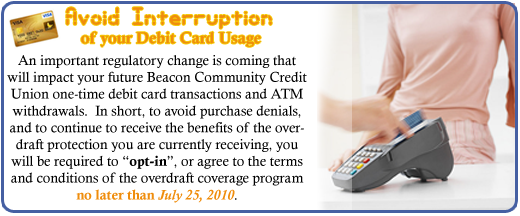
<style>
.page{position:relative;width:520px;height:216px;background:#ffffff}
.page>*{position:absolute;margin:0}
.t1{font:16px "CalisMTBol";color:#ef8d0d}
.t2{font:24px "EntangledLayerABRK";color:#ef8d0d}
.t3{font:14px "CalistoMT";color:#000000}
.t4{font:14px "CalisMTBol";color:#000000}
.t5{font:14px "CalisMTBol";color:#ef8d0d}
.t6{font:14px "CalistoMT-BoldItalic";color:#ef8d0d}
</style>
<div class="page">
<p class="t1" style="left:66px;top:7px;width:206px;height:40px;text-align:center"><span class="t2">Avoid Interruption</span> <br>of your Debit Card Usage</p>
<p class="t3" style="left:7px;top:55px;width:300px;height:148px;text-align:center">An important regulatory change is coming that will impact your future Beacon Community Credit Union one-time debit card transactions and ATM withdrawals.  In short, to avoid purchase denials, and to continue to receive the benefits of the overdraft protection you are currently receiving, you will be required to “<span class="t4">opt-in</span>”, or agree to the terms and conditions of the overdraft coverage program <span class="t5">no later than </span><span class="t6">July 25, 2010</span>.</p>
</div>
